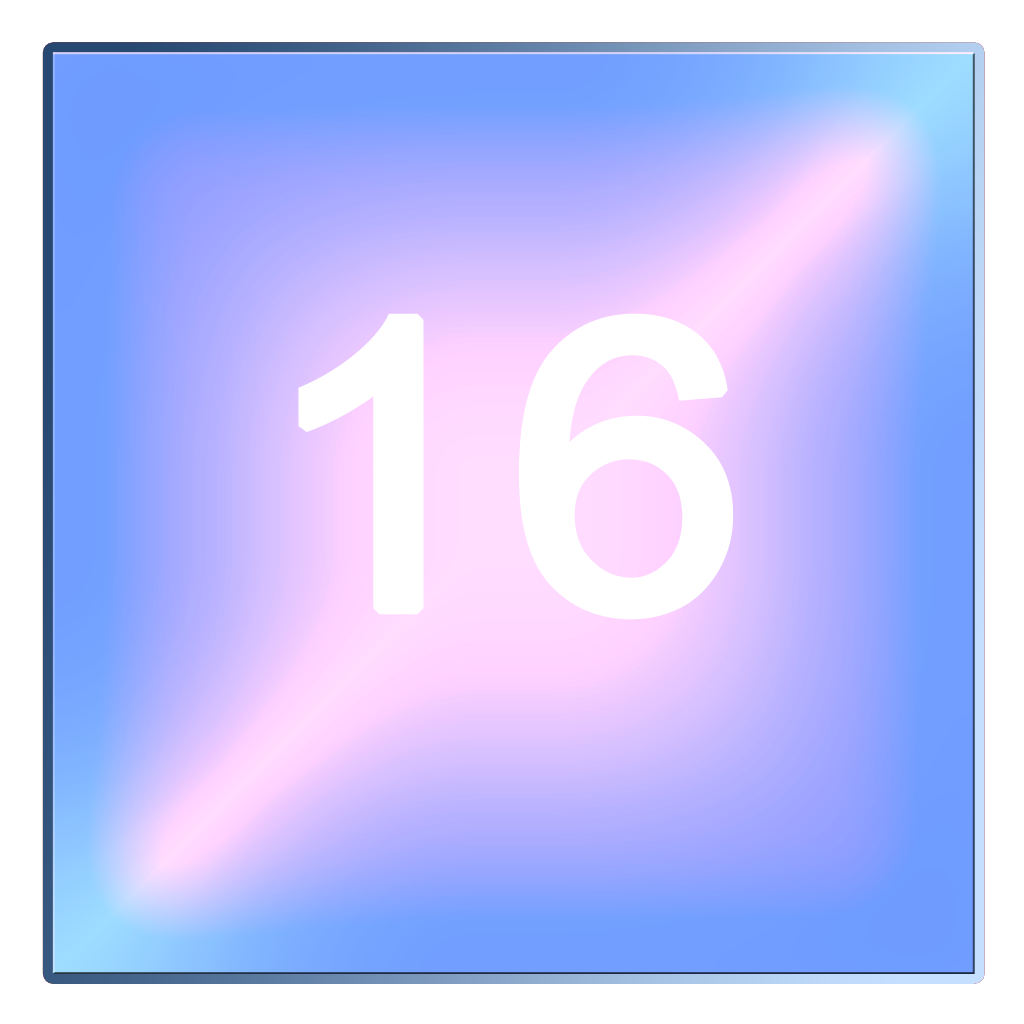
<style>
.page{position:relative;width:1024px;height:1024px;background:#ffffff}
.page>*{position:absolute;margin:0}
.t1{font:400px "ArialNarrow";color:#ffffff;font-weight:bold;scale:1.3 1}
</style>
<div class="page">
<p class="t1" style="left:298px;top:313px;width:436px;height:307px">16</p>
</div>
